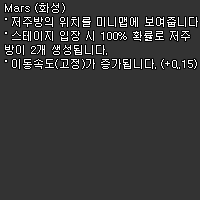
<style>
.page{position:relative;width:200px;height:200px;background:#333333}
.page>*{position:absolute;margin:0}
.t1{font:11px/14px "Dotum";color:#ffffff}
</style>
<div class="page">
<p class="t1" style="left:5px;top:3px;width:193px;height:66px">Mars (화성)<br>˚ 저주방의 위치를 미니맵에 보여줍니다<br>˚ 스테이지 입장 시 100% 확률로 저주<br>방이 2개 생성됩니다.<br>˚ 이동속도(고정)가 증가됩니다. (+0..15)</p>
</div>
